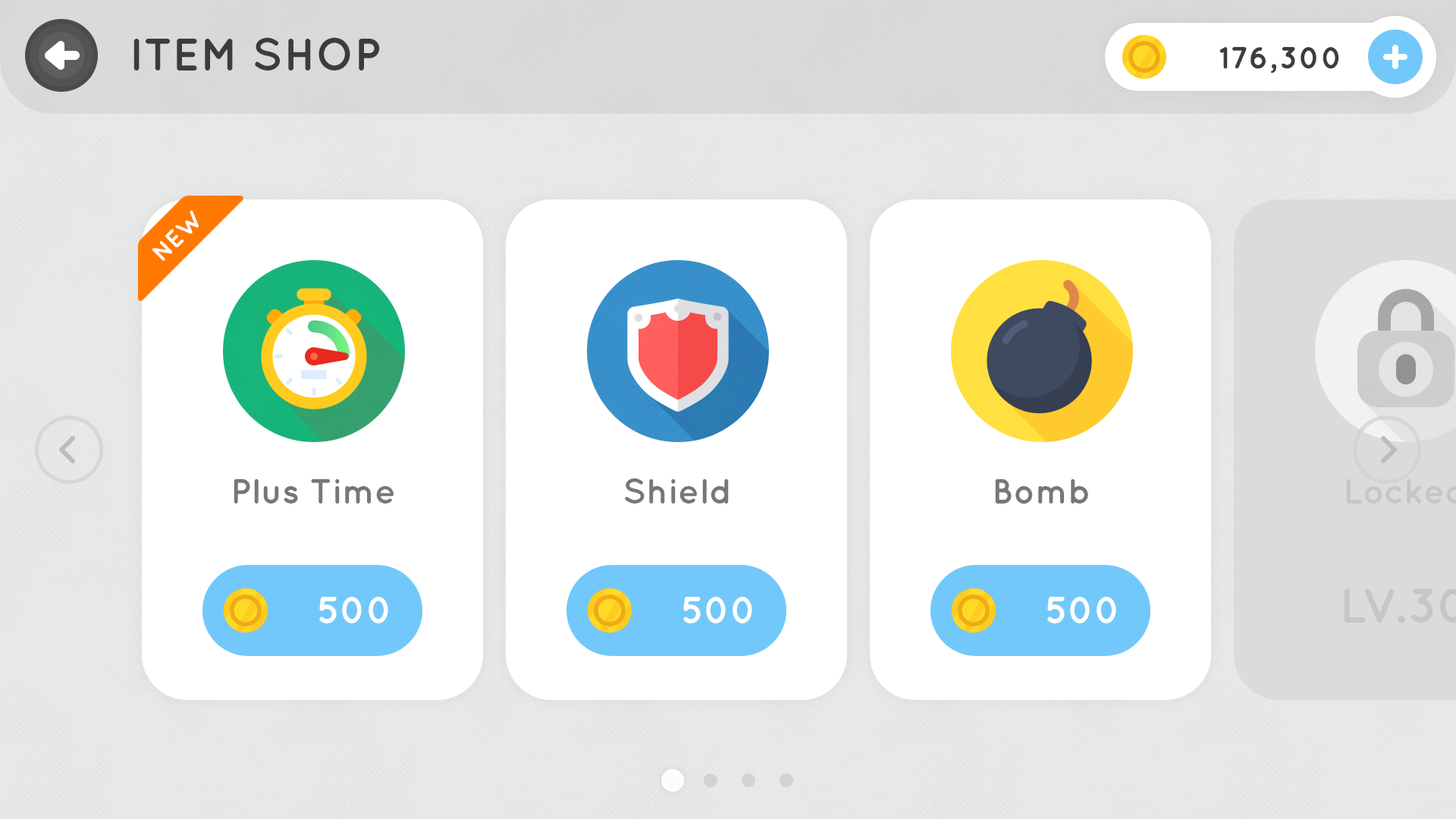
<style>
.page{position:relative;width:1456px;height:819px;background:#ffffff}
.page>*{position:absolute;margin:0}
.t1{font:45.5px "Quicksand-Bold";color:#3c3c3c;text-transform:uppercase}
.t2{font:30.3px "Quicksand-Bold";color:#3d3d3d}
.t3{font:24.3px "Quicksand-Bold";color:#ffffff;text-transform:uppercase}
.t4{font:34.9px "Quicksand-Bold";color:#777777}
.t5{font:37.9px "Quicksand-Bold";color:#ffffff}
</style>
<div class="page">
<p class="t1" style="left:133px;top:37px;width:247px;height:34px">ITEM SHOP</p>
<p class="t2" style="left:1219px;top:47px;width:120px;height:27px">176,300</p>
<p class="t3" style="left:152px;top:210px;width:47px;height:51px;rotate:-45deg">New</p>
<p class="t4" style="left:234px;top:479px;width:160px;height:25px">Plus Time</p>
<p class="t4" style="left:625px;top:478px;width:104px;height:26px">Shield</p>
<p class="t4" style="left:995px;top:479px;width:93px;height:25px">Bomb</p>
<p class="t5" style="left:319px;top:597px;width:69px;height:26px">500</p>
<p class="t5" style="left:683px;top:597px;width:69px;height:26px">500</p>
<p class="t5" style="left:1047px;top:597px;width:69px;height:26px">500</p>
</div>
